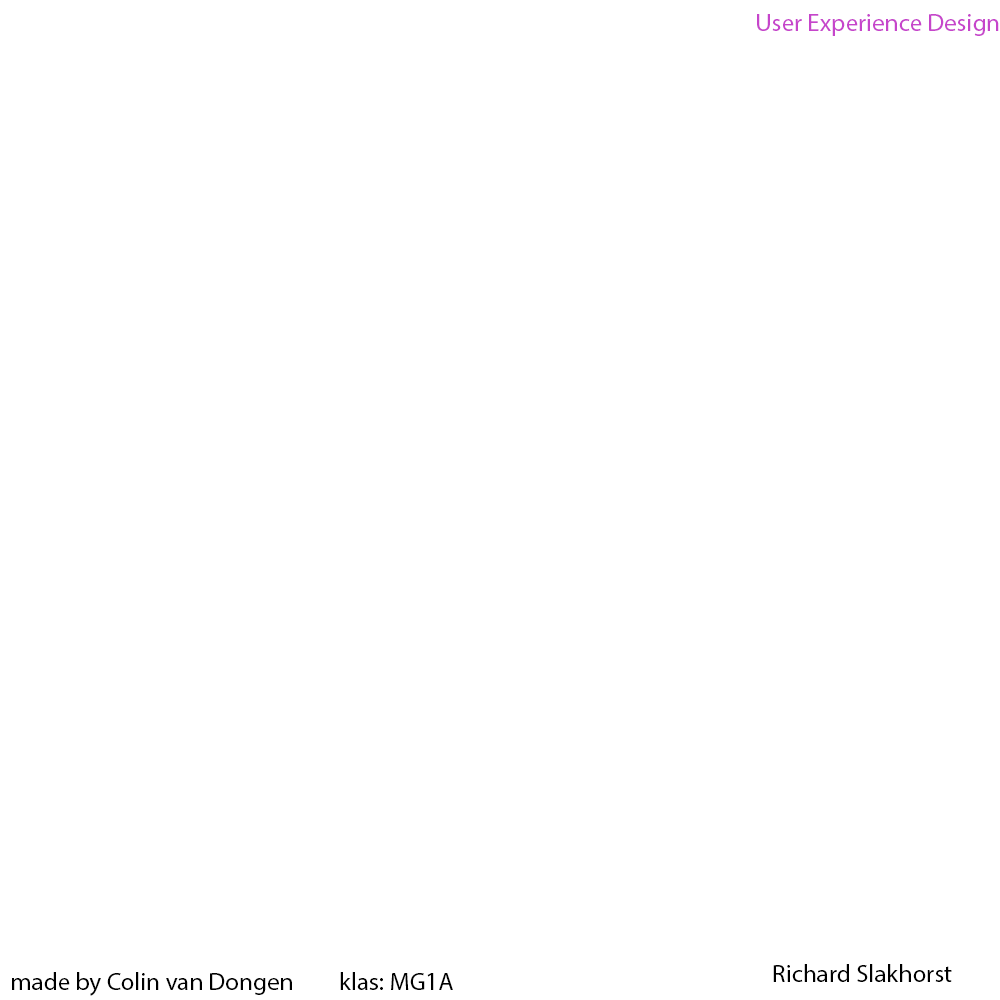
<style>
.page{position:relative;width:1000px;height:1000px;background:#ffffff}
.page>*{position:absolute;margin:0}
.t1{font:25px "MyriadPro-Regular";color:#c645cb}
.t2{font:25px "MyriadPro-Regular";color:#000000}
</style>
<div class="page">
<p class="t1" style="left:757px;top:14px;width:242px;height:22px">User Experience Design</p>
<p class="t2" style="left:773px;top:964px;width:179px;height:18px">Richard Slakhorst</p>
<p class="t2" style="left:12px;top:972px;width:280px;height:24px">made by Colin van Dongen</p>
<p class="t2" style="left:340px;top:972px;width:113px;height:18px">klas: MG1A</p>
</div>
